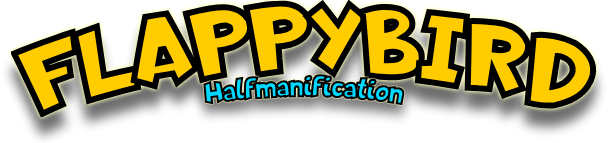
<style>
.page{position:relative;width:608px;height:143px;background:#ffffff}
.page>*{position:absolute;margin:0}
.t1{font:100px "LapsusPro-Bold"}
.t2{font:30px "LapsusPro-Bold"}
</style>
<div class="page">
<p class="t1" style="left:11px;top:0px;width:586px;height:117px">FLAPPYBIRD</p>
<p class="t2" style="left:203px;top:74px;width:202px;height:31px">Halfmanification</p>
</div>
